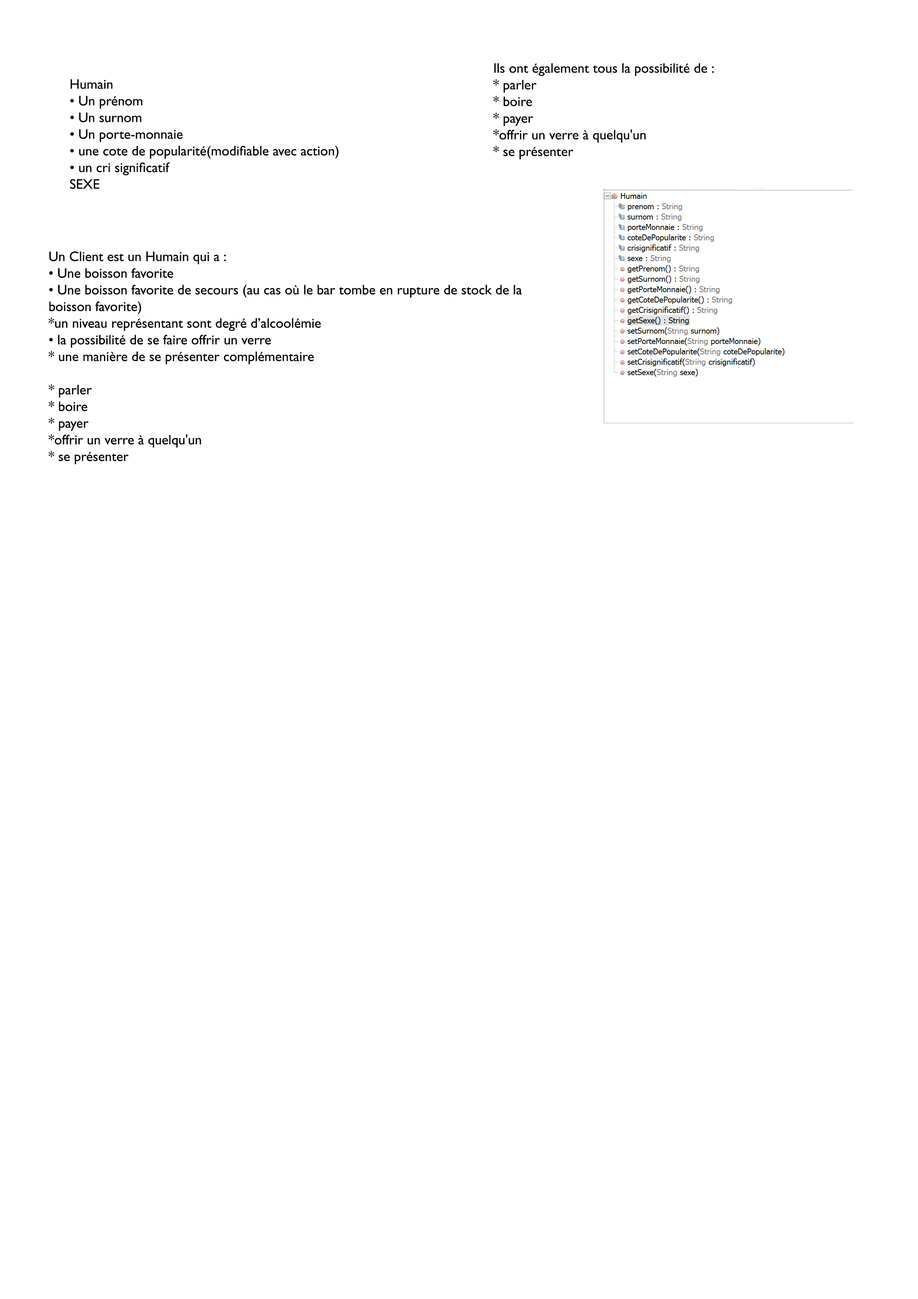
<style>
.page{position:relative;width:918px;height:1299px;background:#ffffff}
.page>*{position:absolute;margin:0}
.t1{font:13.9px "GillSansStd";color:#000000}
</style>
<div class="page">
<p class="t1" style="left:493px;top:63px;width:221px;height:97px">Ils ont également tous la possibilité de :<br>* parler<br>* boire<br>* payer<br>*offrir un verre à quelqu'un<br>* se présenter</p>
<p class="t1" style="left:70px;top:79px;width:269px;height:110px">Humain<br>• Un prénom<br>• Un surnom<br>• Un porte-monnaie<br>• une cote de popularité(modifiable avec action)<br>• un cri significatif<br>SEXE</p>
<p class="t1" style="left:48px;top:251px;width:474px;height:213px">Un Client est un Humain qui a :<br>• Une boisson favorite<br>• Une boisson favorite de secours (au cas où le bar tombe en rupture de stock de la<br>boisson favorite)<br>*un niveau représentant sont degré d’alcoolémie<br>• la possibilité de se faire offrir un verre<br>* une manière de se présenter complémentaire<br><br>* parler<br>* boire<br>* payer<br>*offrir un verre à quelqu'un<br>* se présenter</p>
</div>
